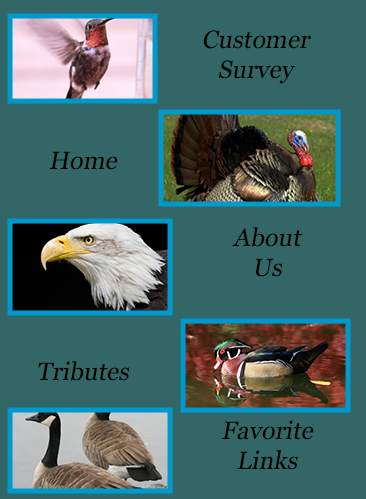
<style>
.page{position:relative;width:366px;height:499px;background:#336666}
.page>*{position:absolute;margin:0}
.t1{font:25px "Georgia";color:#000000;font-style:italic}
</style>
<div class="page">
<p class="t1" style="left:203px;top:30px;width:108px;height:54px;text-align:center">Customer <br>Survey</p>
<p class="t1" style="left:49px;top:151px;width:69px;height:19px">Home</p>
<p class="t1" style="left:232px;top:227px;width:71px;height:50px;text-align:center">About<br>Us</p>
<p class="t1" style="left:38px;top:361px;width:92px;height:20px">Tributes</p>
<p class="t1" style="left:222px;top:420px;width:92px;height:50px;text-align:center">Favorite<br>Links</p>
</div>
